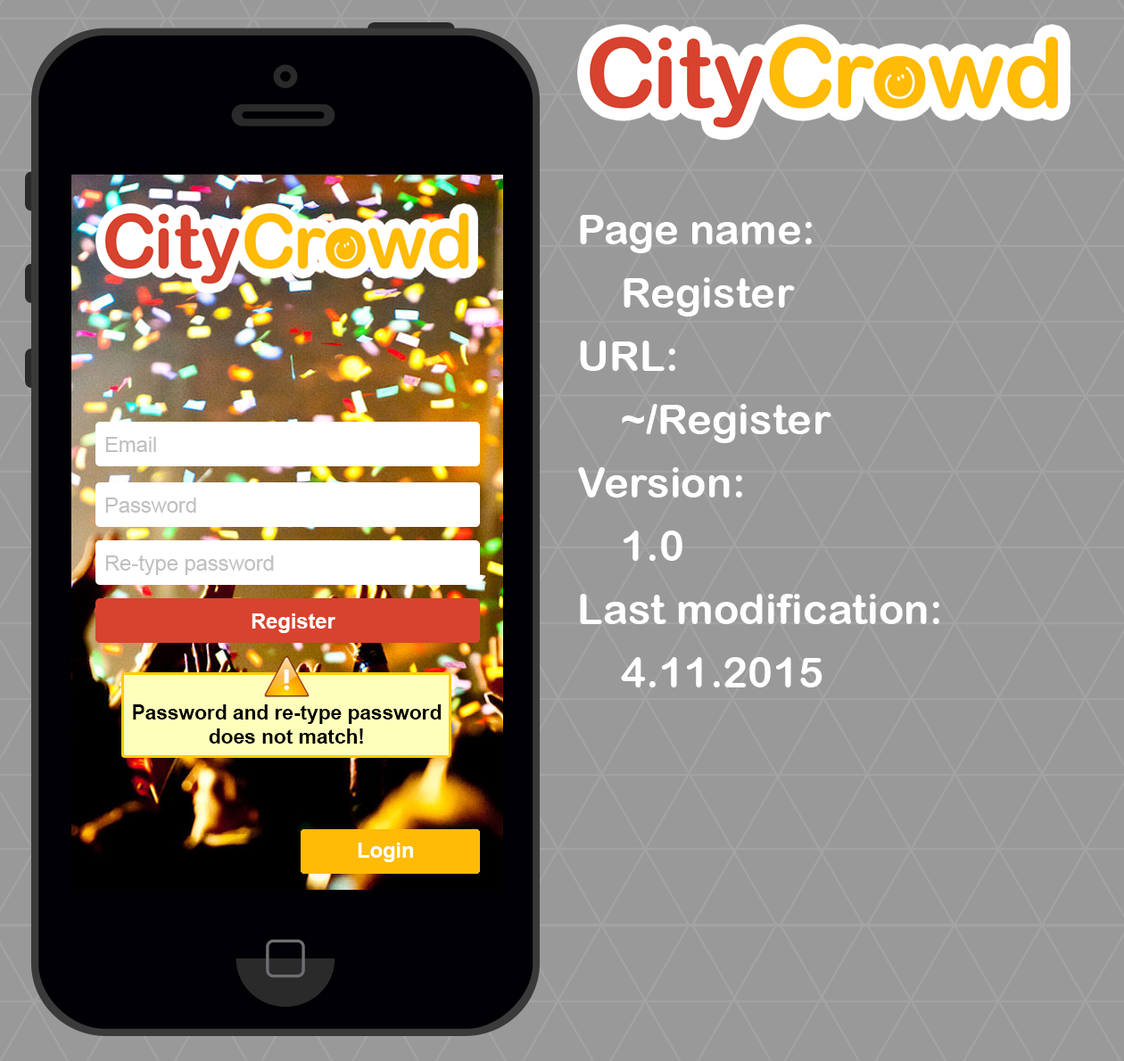
<style>
.page{position:relative;width:1124px;height:1061px;background:#999999}
.page>*{position:absolute;margin:0}
.t1{font:42.2px/63.3px "ArialRoundedMTBold";color:#ffffff}
.t2{font:21.1px "ArialMT";color:#c0c0c0}
.t3{font:21.1px "Arial-BoldMT";color:#ffffff}
.t4{font:20.2px "Arial-BoldMT";color:#000000}
</style>
<div class="page">
<p class="t1" style="left:578px;top:215px;width:361px;height:473px">Page name:<br>Register<br>URL:<br>~/Register<br>Version:<br>1.0<br>Last modification:<br>4.11.2015</p>
<p class="t2" style="left:105px;top:437px;width:51px;height:15px">Email</p>
<p class="t2" style="left:105px;top:498px;width:91px;height:15px">Password</p>
<p class="t2" style="left:105px;top:555px;width:169px;height:20px">Re-type password</p>
<p class="t3" style="left:251px;top:614px;width:84px;height:19px">Register</p>
<p class="t4" style="left:133px;top:705px;width:308px;height:39px;text-align:center">Password and re-type password does not match!</p>
<p class="t3" style="left:358px;top:843px;width:55px;height:19px">Login</p>
</div>
